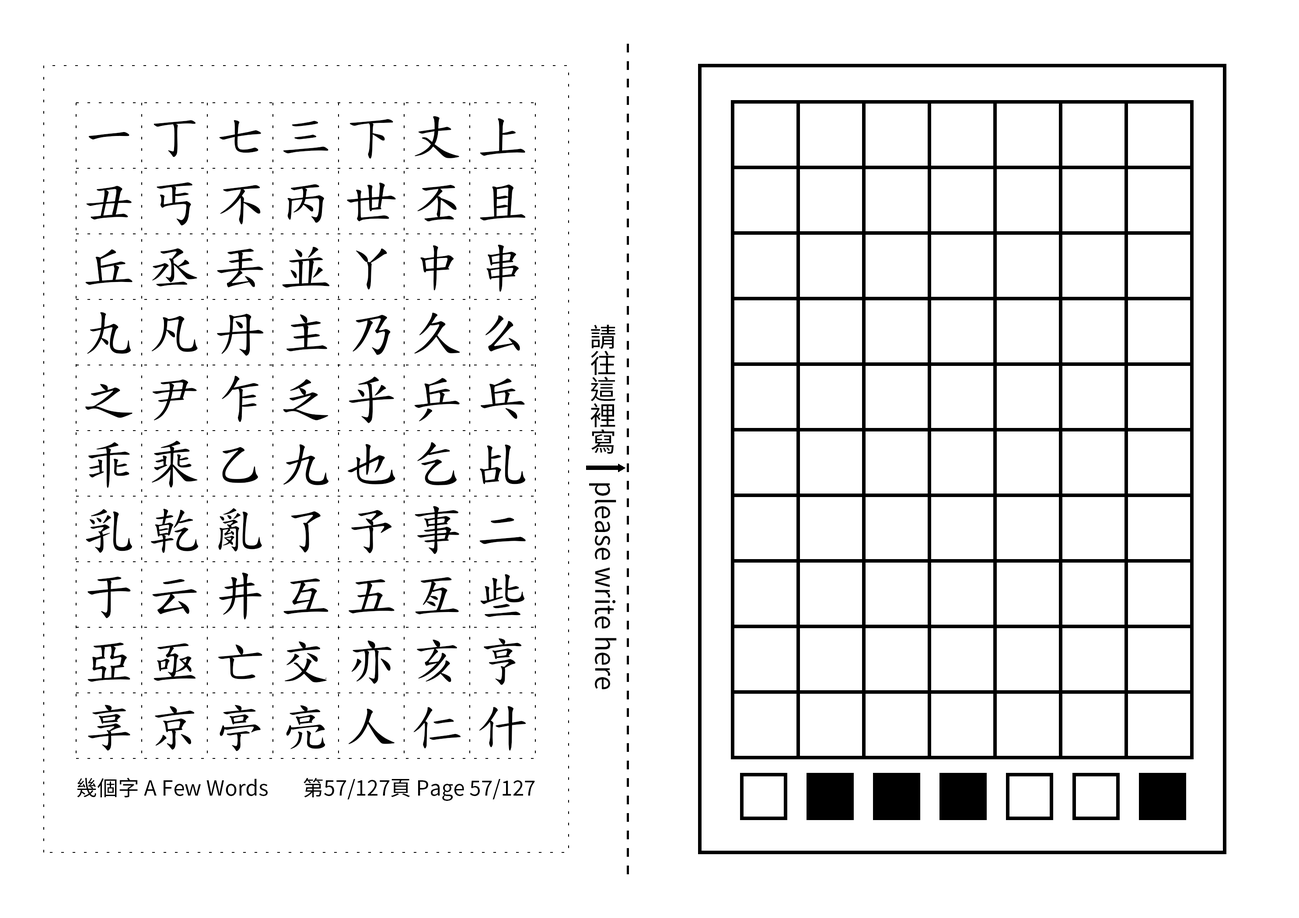
<style>
.page{position:relative;width:1299px;height:918px;background:#ffffff}
.page>*{position:absolute;margin:0}
.t1{font:52.5px/65.6px "TW-Kai-98_1";letter-spacing:0.25em;color:#000000}
.t2{font:26.2px "SourceHanSansTC-Regular";color:#000000}
.t3{font:21px "SourceHanSansTC-Regular";color:#000000}
</style>
<div class="page">
<p class="t1" style="left:85px;top:116px;width:441px;height:636px;text-align:center">一丁七三下丈上丑丐不丙世丕且丘丞丟並丫中串丸凡丹主乃久么之尹乍乏乎乒乓乖乘乙九也乞乩乳乾亂了予事二于云井互五亙些亞亟亡交亦亥亨享京亭亮人仁什</p>
<p class="t2" style="left:589px;top:324px;width:28px;height:366px;text-align:center">請往這裡寫　please write here</p>
<p class="t3" style="left:77px;top:778px;width:191px;height:20px">幾個字 A Few Words</p>
<p class="t3" style="left:303px;top:778px;width:232px;height:23px">第57/127頁 Page 57/127</p>
</div>
